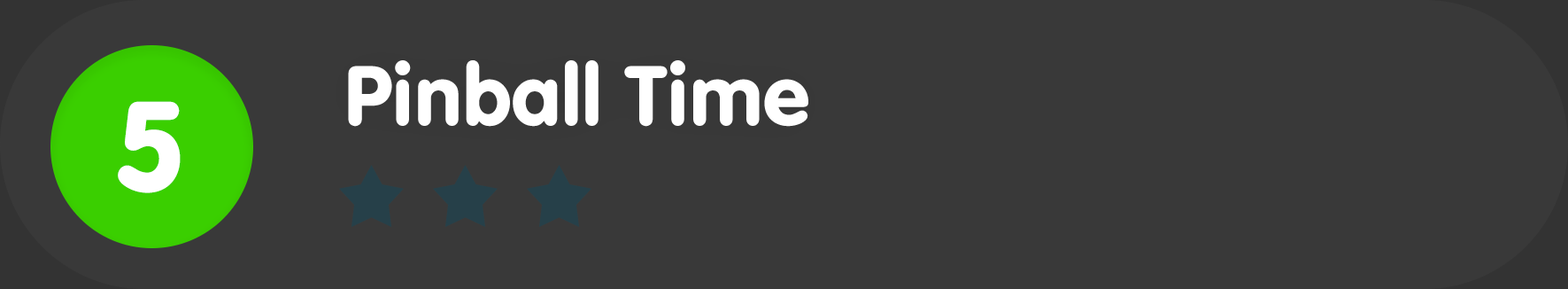
<style>
.page{position:relative;width:1568px;height:289px;background:#393939}
.page>*{position:absolute;margin:0}
.t1{font:88.5px "VAGRundschriftD";color:#ffffff}
.t2{font:132.8px "VAGRundschriftD";color:#ffffff}
</style>
<div class="page">
<p class="t1" style="left:348px;top:60px;width:460px;height:67px">Pinball Time</p>
<p class="t2" style="left:118px;top:101px;width:63px;height:92px">5</p>
</div>
